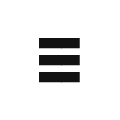
<style>
.page{position:relative;width:120px;height:120px;background:#ffffff}
.page>*{position:absolute;margin:0}
.t1{font:90px "CeraPro-Bold";color:#121212}
</style>
<div class="page">
<p class="t1" style="left:39px;top:38px;width:41px;height:11px">--</p>
<p class="t1" style="left:39px;top:55px;width:41px;height:11px">--</p>
<p class="t1" style="left:39px;top:72px;width:41px;height:11px">--</p>
</div>
